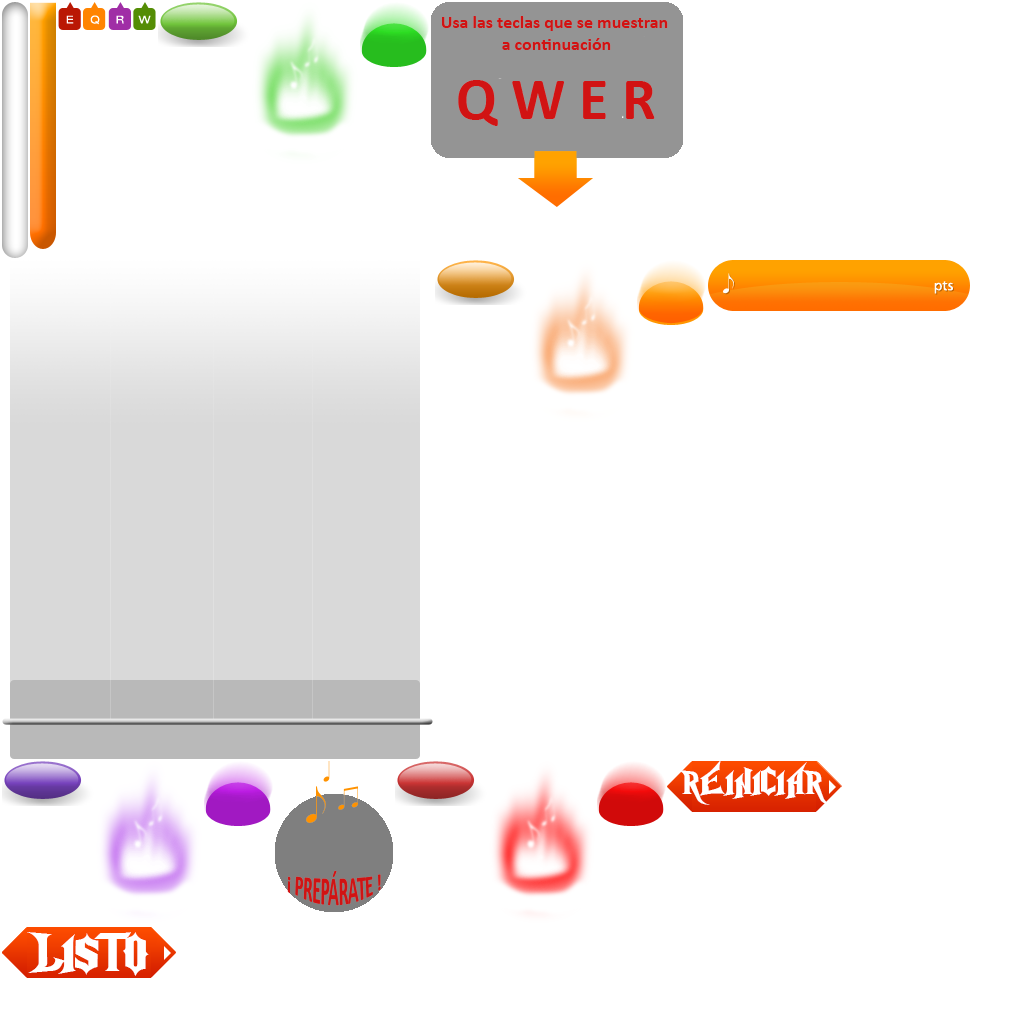
<style>
.page{position:relative;width:1024px;height:1024px;background:#ffffff}
.page>*{position:absolute;margin:0}
.t1{font:18px "Calibri-Bold";color:#d11313}
.t2{font:60px "Calibri-Bold";color:#d11313}
.t3{font:36px "NightmareHero";color:#ffffff}
.t4{font:20px "Calibri-Bold";color:#d11313;scale:0.82 1}
.t5{font:56px "NightmareHero";color:#ffffff}
</style>
<div class="page">
<p class="t1" style="left:442px;top:16px;width:226px;height:34px;text-align:center">Usa las teclas que se muestran <br>a continuación</p>
<p class="t2" style="left:458px;top:80px;width:197px;height:46px">Q W E R</p>
<p class="t3" style="left:678px;top:760px;width:155px;height:45px">REINICIAR</p>
<p class="t4" style="left:287px;top:870px;width:94px;height:36px;text-align:center">¡ PREPÁRATE !</p>
<p class="t5" style="left:27px;top:932px;width:122px;height:44px">LISTO</p>
</div>
